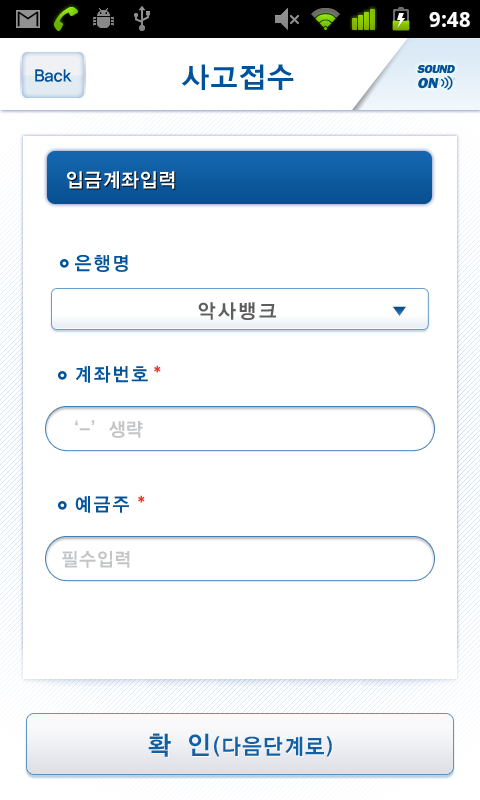
<style>
.page{position:relative;width:480px;height:800px;background:#ffffff}
.page>*{position:absolute;margin:0}
.t1{font:29px "YDIYGO140-KSCpc-EUC-H";letter-spacing:-0.025em;color:#00529b}
.t2{font:12px/15px "FranklinGothic-Heavy";letter-spacing:-0.05em;color:#00529b;text-transform:uppercase;font-style:italic}
.t3{font:13px/15px "FranklinGothic-Heavy";color:#00529b;text-transform:uppercase;font-style:italic}
.t4{font:15px/15px "FranklinGothic-Heavy";color:#00529b;text-transform:uppercase;font-style:italic}
.t5{font:18px "YDIYGO140-KSCpc-EUC-H";letter-spacing:-0.075em;color:#00529b;scale:0.95 1}
.t6{font:20px "YDIYGO140-KSCpc-EUC-H";letter-spacing:-0.025em;color:#ffffff;scale:0.95 1}
.t7{font:19px "YDIYGO140-KSCpc-EUC-H";letter-spacing:0.05em;color:#00529b;scale:0.95 1}
.t8{font:20px "YDIYGO140-KSCpc-EUC-H";letter-spacing:0.075em;color:#5c5c5c;scale:0.95 1}
.t9{font:18px "YDIYGO140-KSCpc-EUC-H";letter-spacing:-0.2em;color:#e43925;scale:0.95 1}
.t10{font:19px "YDIYGO140-KSCpc-EUC-H";letter-spacing:-0.025em;color:#c1c3c4;scale:0.95 1}
.t11{font:22px "YDIYGO140-KSCpc-EUC-H";color:#115fa5;scale:0.95 1}
.t12{font:26px "YDIYGO140-KSCpc-EUC-H";letter-spacing:0.05em;color:#115fa5;scale:0.95 1}
</style>
<div class="page">
<p class="t1" style="left:181px;top:64px;width:113px;height:26px">사고접수</p>
<p class="t2" style="left:417px;top:65px;width:38px;height:24px">sound<br><span class="t3">oFF</span></p>
<p class="t2" style="left:417px;top:65px;width:38px;height:24px">sound<br><span class="t4">on</span></p>
<p class="t5" style="left:35px;top:69px;width:37px;height:13px">Back</p>
<p class="t6" style="left:67px;top:171px;width:108px;height:18px">입금계좌입력</p>
<p class="t7" style="left:75px;top:255px;width:53px;height:17px">은행명</p>
<p class="t8" style="left:198px;top:302px;width:78px;height:18px">악사뱅크</p>
<p class="t7" style="left:75px;top:366px;width:73px;height:17px">계좌번호</p>
<p class="t9" style="left:154px;top:365px;width:7px;height:8px">*</p>
<p class="t10" style="left:75px;top:420px;width:68px;height:18px">‘-’생략</p>
<p class="t7" style="left:75px;top:496px;width:54px;height:17px">예금주</p>
<p class="t9" style="left:138px;top:495px;width:7px;height:8px">*</p>
<p class="t10" style="left:62px;top:551px;width:68px;height:17px">필수입력</p>
<p class="t11" style="left:148px;top:733px;width:184px;height:24px"><span class="t12">확 인</span>(다음단계로)</p>
</div>
